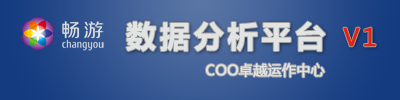
<style>
.page{position:relative;width:400px;height:100px}
.page>*{position:absolute;margin:0}
.t1{font:30px "MicrosoftYaHei-Bold";letter-spacing:0.1em;color:#e2e4e3;font-weight:bold}
.t2{font:24px "MicrosoftYaHei";letter-spacing:0.1em;color:#e72112;font-weight:bold}
.t3{font:14px "MicrosoftYaHei";color:#e2e4e3;font-weight:bold}
</style>
<div class="page">
<p class="t1" style="left:126px;top:21px;width:200px;height:31px">数据分析平台</p>
<p class="t2" style="left:343px;top:27px;width:33px;height:20px">V1</p>
<p class="t3" style="left:206px;top:63px;width:119px;height:15px">COO卓越运作中心</p>
</div>
